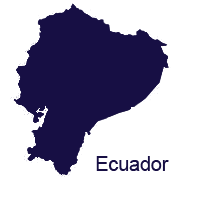
<style>
.page{position:relative;width:200px;height:200px;background:#ffffff}
.page>*{position:absolute;margin:0}
.t1{font:20.8px "ArialMT";color:#170f44;scale:0.94 1}
</style>
<div class="page">
<p class="t1" style="left:96px;top:156px;width:73px;height:15px">Ecuador</p>
</div>
